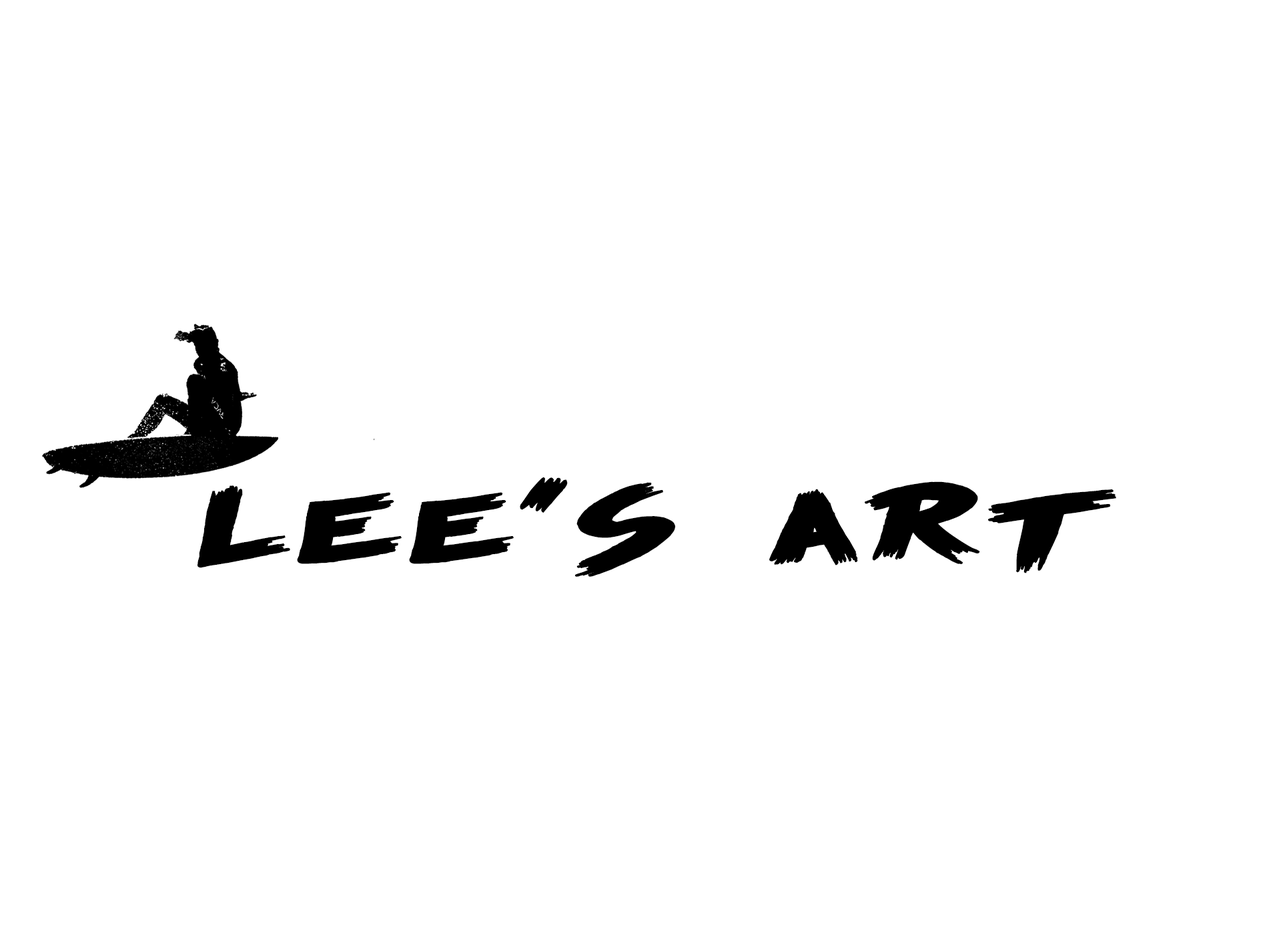
<style>
.page{position:relative;width:1261px;height:946px;background:#ffffff}
.page>*{position:absolute;margin:0}
.t1{font:58.9px "ScreamAgain";color:#000000;font-weight:bold;scale:1.75 1}
</style>
<div class="page">
<p class="t1" style="left:197px;top:477px;width:919px;height:100px">lee's  art</p>
</div>
